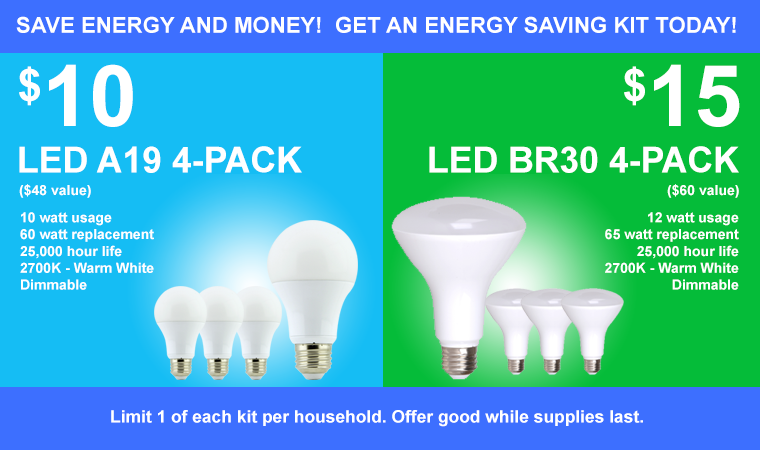
<style>
.page{position:relative;width:760px;height:450px;background:#3d6fff}
.page>*{position:absolute;margin:0}
.t1{font:21.9px "Arial-BoldMT";color:#ffffff}
.t2{font:85px "Arial-BoldMT";color:#ffffff}
.t3{font:76px "Arial-BoldMT";color:#ffffff}
.t4{font:35.6px "Arial-BoldMT";color:#ffffff;text-transform:uppercase}
.t5{font:14px "Arial-BoldMT";color:#ffffff}
.t6{font:17px "Arial-BoldMT";color:#ffffff}
</style>
<div class="page">
<p class="t1" style="left:16px;top:16px;width:720px;height:17px">SAVE ENERGY AND MONEY!  GET AN ENERGY SAVING KIT TODAY!</p>
<p class="t2" style="left:19px;top:64px;width:114px;height:63px"><span class="t3">$</span>10</p>
<p class="t2" style="left:624px;top:64px;width:116px;height:63px"><span class="t3">$</span>15</p>
<p class="t4" style="left:19px;top:146px;width:283px;height:27px">LED A19 4-pack</p>
<p class="t4" style="left:429px;top:146px;width:310px;height:27px">LED BR30 4-pack</p>
<p class="t5" style="left:19px;top:184px;width:72px;height:14px">($48 value)</p>
<p class="t5" style="left:667px;top:184px;width:72px;height:14px">($60 value)</p>
<p class="t5" style="left:20px;top:212px;width:134px;height:78px">10 watt usage<br>60 watt replacement<br>25,000 hour life<br>2700K - Warm White<br>Dimmable</p>
<p class="t5" style="left:605px;top:212px;width:134px;height:78px;text-align:right">12 watt usage<br>65 watt replacement<br>25,000 hour life<br>2700K - Warm White<br>Dimmable</p>
<p class="t6" style="left:111px;top:410px;width:532px;height:17px">Limit 1 of each kit per household. Offer good while supplies last.</p>
</div>
